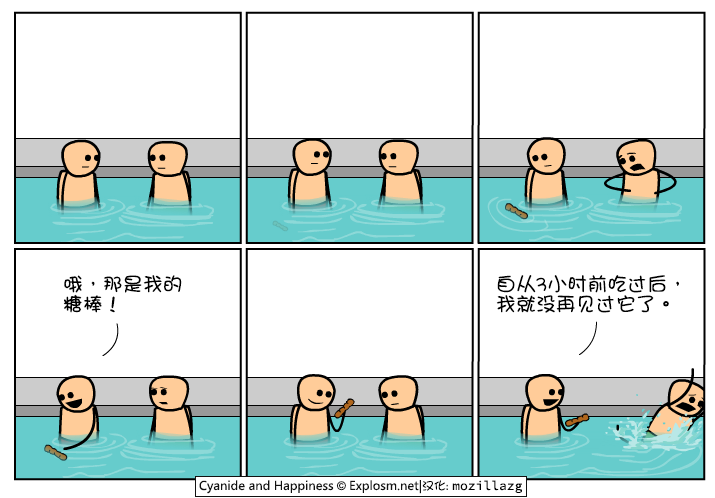
<style>
.page{position:relative;width:715px;height:498px;background:#ffffff}
.page>*{position:absolute;margin:0}
.t1{font:20px/20px "DFGirl";color:#000000}
</style>
<div class="page">
<p class="t1" style="left:63px;top:275px;width:119px;height:38px">哦，那是我的<br>糖棒！</p>
<p class="t1" style="left:496px;top:275px;width:183px;height:38px">自从3小时前吃过后，<br>我就没再见过它了。</p>
</div>
